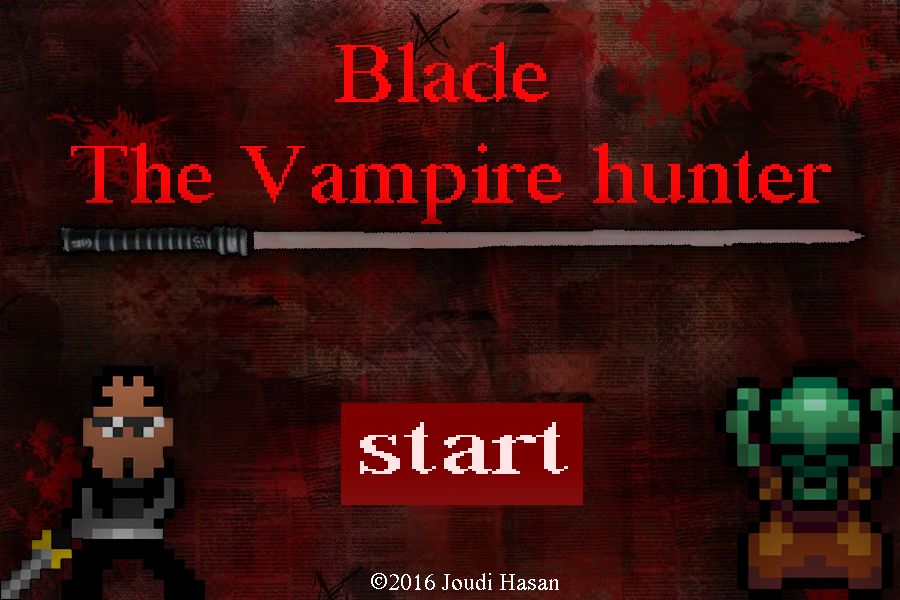
<style>
.page{position:relative;width:900px;height:600px}
.page>*{position:absolute;margin:0}
.t1{font:83.5px "MS Serif";color:#ff0708;scale:1.14 1}
.t2{font:83.5px "MS Serif";color:#b5b5b5;scale:1.14 1}
.t3{font:83.5px "MS Serif";color:#ffe5e5;scale:1.53 1}
.t4{font:24px "MS Serif";color:#ffffff}
</style>
<div class="page">
<p class="t1" style="left:71px;top:42px;width:760px;height:182px"><span class="t2">              </span>Blade<br>   The Vampire hunter</p>
<p class="t3" style="left:360px;top:422px;width:208px;height:52px">start</p>
<p class="t4" style="left:371px;top:573px;width:188px;height:17px">©2016 Joudi Hasan</p>
</div>
